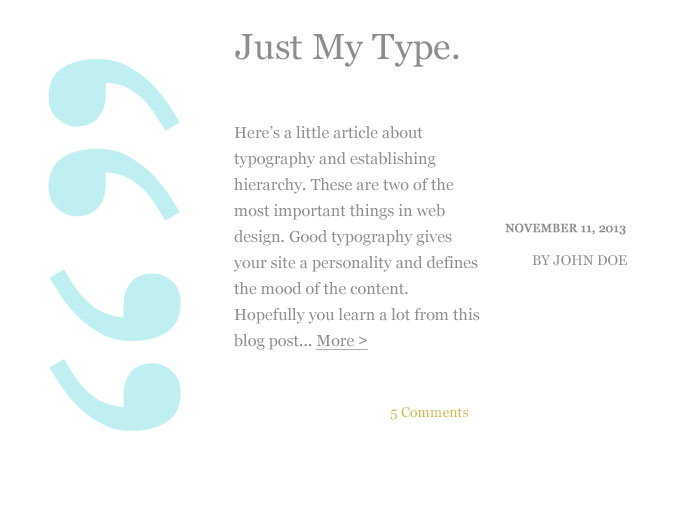
<style>
.page{position:relative;width:700px;height:520px;background:#ffffff}
.page>*{position:absolute;margin:0}
.t1{font:16px/26px "Georgia";letter-spacing:0.005em;color:#8e8e8e}
.t2{font:16px/26px "Georgia";letter-spacing:0.005em;color:#8e8e8e;text-decoration:underline}
.t3{font:16px/26px "GillSans";letter-spacing:0.005em;color:#8e8e8e;text-decoration:underline}
</style>
<div class="page">
<p class="t1" style="left:233px;top:126px;width:247px;height:224px">Here’s a little article about typography and establishing hierarchy. These are two of the most important things in web design. Good typography gives your site a personality and defines the mood of the content. Hopefully you learn a lot from this blog post... <span class="t2">More </span><span class="t3">&gt;</span></p>
</div>
